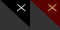
<style>
.page{position:relative;width:60px;height:30px;background:#333333}
.page>*{position:absolute;margin:0}
.t1{font:8.9px "OpenSans-Light";letter-spacing:-0.02em;scale:1.86 1}
</style>
<div class="page">
<p class="t1" style="left:17px;top:4px;width:9px;height:8px">X</p>
<p class="t1" style="left:48px;top:4px;width:9px;height:8px">X</p>
</div>
